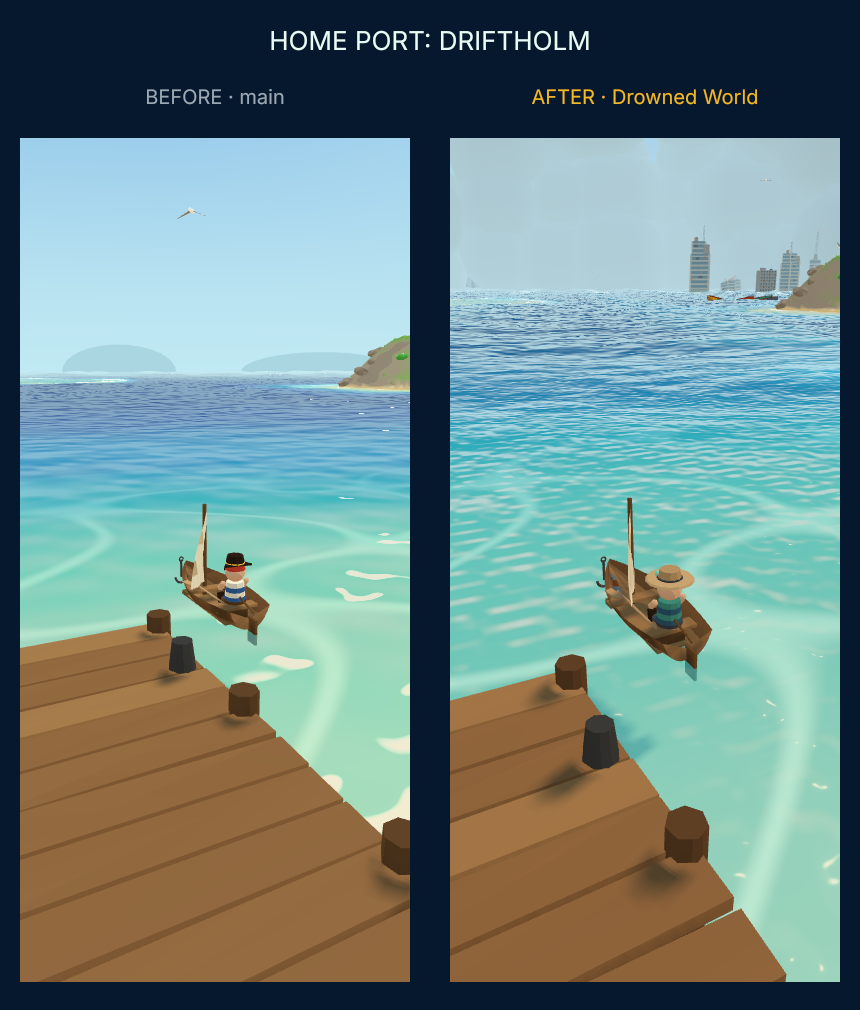
<style>
.page{position:relative;width:860px;height:1010px;background:#06182e}
.page>*{position:absolute;margin:0}
.t1{font:26px "Nunito-Regular";color:#e9fbf6}
.t2{font:20px "Nunito-Regular";color:#9aa9b4}
.t3{font:20px "Nunito-Regular";color:#f2b825}
</style>
<div class="page">
<p class="t1" style="left:270px;top:30px;width:320px;height:22px">HOME PORT: DRIFTHOLM</p>
<p class="t2" style="left:146px;top:88px;width:139px;height:18px">BEFORE · main</p>
<p class="t3" style="left:531px;top:89px;width:227px;height:17px">AFTER · Drowned World</p>
</div>
